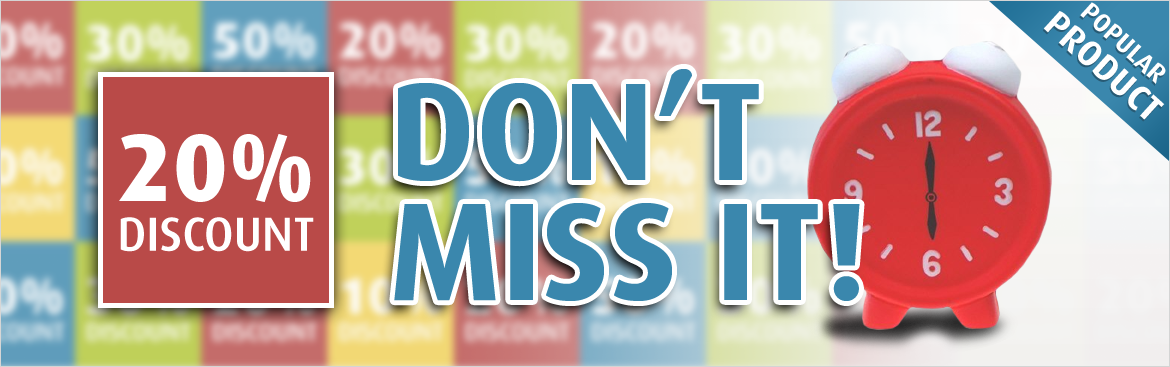
<style>
.page{position:relative;width:1170px;height:367px}
.page>*{position:absolute;margin:0}
.t1{font:26px/34px "Dax-Bold";color:#ffffff}
.t2{font:36px/34px "Dax-Bold";color:#ffffff}
.t3{font:140px/120px "Dax-Bold";color:#3a87ad}
</style>
<div class="page">
<p class="t1" style="left:1042px;top:4px;width:123px;height:118px;text-align:center;rotate:42deg">POPULAR<br><span class="t2">PRODUCT</span></p>
<p class="t1" style="left:1043px;top:2px;width:123px;height:118px;text-align:center;rotate:42deg">POPULAR<br><span class="t2">PRODUCT</span></p>
<p class="t3" style="left:394px;top:69px;width:466px;height:232px">DON’T<br>MISS IT!</p>
</div>
